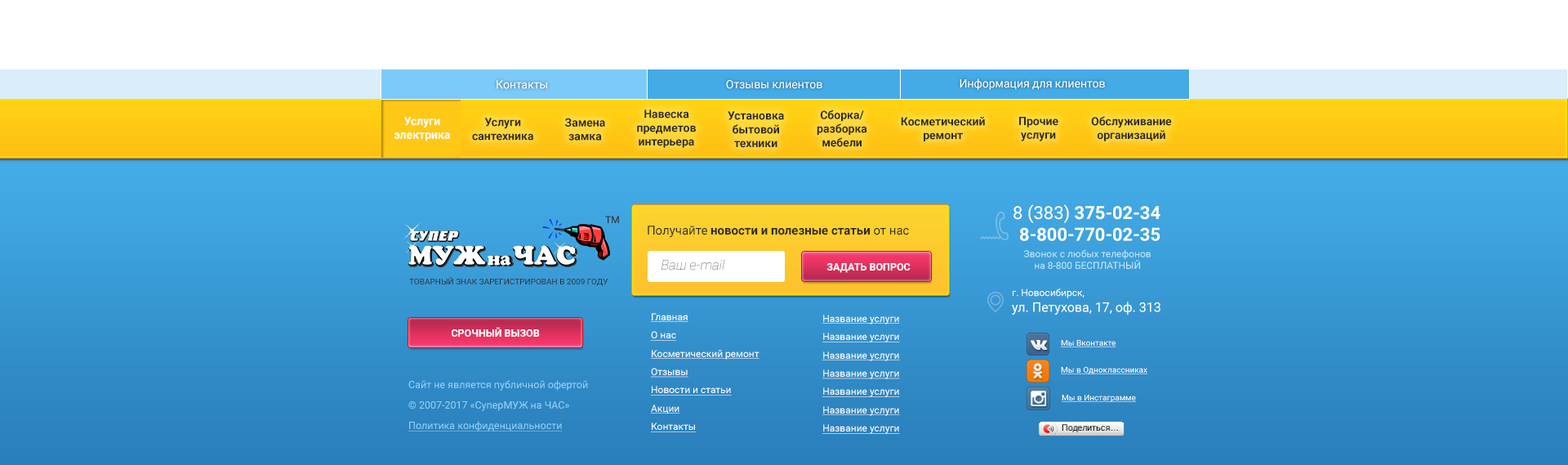
<style>
.page{position:relative;width:1568px;height:465px}
.page>*{position:absolute;margin:0}
.t1{font:11.4px "Roboto-Regular";color:#ffffff}
.t2{font:11.4px "Roboto-Bold";color:#2d2d2d}
.t3{font:11.4px "Roboto-Bold";color:#ffffff}
.t4{font:18px "Roboto-Bold";color:#ffffff}
.t5{font:18px "Roboto-Regular";color:#ffffff}
.t6{font:12.2px "Roboto-Bold";color:#2d2d2d}
.t7{font:12.2px "Roboto-Regular";color:#2d2d2d}
.t8{font:9.8px "Roboto-Regular";color:#bfe6ff}
.t9{font:9.8px "Roboto-Regular";color:#bfe6ff;text-transform:uppercase}
.t10{font:13.6px "Roboto-ThinItalic"}
.t11{font:10.2px "Roboto-Bold";color:#fffefe;text-transform:uppercase}
.t12{font:8.2px "Roboto-Regular";color:#2d2d2d;text-transform:uppercase}
.t13{font:13.1px "Roboto-Regular";color:#ffffff}
.t14{font:9.8px "Roboto-Regular";color:#ffffff}
.t15{font:9.8px "Roboto-Regular";color:#ffffff;text-decoration:underline}
.t16{font:8.2px "Roboto-Regular";color:#ffffff;text-decoration:underline}
.t17{font:10.2px "Roboto-Regular";color:#94d1f8}
.t18{font:10.2px "Roboto-Regular";color:#94d1f8;text-decoration:underline}
</style>
<div class="page">
<p class="t1" style="left:497px;top:80px;width:50px;height:9px">Контакты</p>
<p class="t1" style="left:726px;top:80px;width:96px;height:9px">Отзывы клиентов</p>
<p class="t1" style="left:960px;top:78px;width:145px;height:12px">Информация для клиентов</p>
<p class="t2" style="left:637px;top:109px;width:59px;height:39px;text-align:center">Навеска<br>предметов<br>интерьера</p>
<p class="t2" style="left:728px;top:111px;width:56px;height:37px;text-align:center">Установка<br>бытовой<br>техники</p>
<p class="t2" style="left:817px;top:109px;width:50px;height:38px;text-align:center">Сборка/<br>разборка<br>мебели</p>
<p class="t3" style="left:394px;top:117px;width:56px;height:24px;text-align:center">Услуги<br>электрика</p>
<p class="t2" style="left:472px;top:118px;width:61px;height:22px;text-align:center">Услуги<br>сантехника</p>
<p class="t2" style="left:565px;top:118px;width:40px;height:22px;text-align:center">Замена<br>замка</p>
<p class="t2" style="left:901px;top:117px;width:84px;height:24px;text-align:center">Косметический<br>ремонт</p>
<p class="t2" style="left:1019px;top:117px;width:39px;height:24px;text-align:center">Прочие<br>услуги</p>
<p class="t2" style="left:1091px;top:116px;width:81px;height:25px;text-align:center">Обслуживание<br>организаций</p>
<p class="t4" style="left:1013px;top:204px;width:147px;height:37px;text-align:right"><span class="t5">8 (383) </span>375-02-34<br>8-800-770-02-35</p>
<p class="t6" style="left:648px;top:225px;width:261px;height:13px"><span class="t7">Получайте </span>новости и полезные статьи<span class="t7"> от нас</span></p>
<p class="t8" style="left:1024px;top:249px;width:127px;height:20px;text-align:center">Звонок с любых телефонов<br>на 8-800 <span class="t9">бесплатный</span></p>
<p class="t10" style="left:662px;top:259px;width:63px;height:11px">Ваш e-mail</p>
<p class="t11" style="left:826px;top:263px;width:85px;height:10px">задать вопрос</p>
<p class="t12" style="left:409px;top:277px;width:199px;height:9px">Товарный знак зарегистрирован в 2009 году</p>
<p class="t13" style="left:1012px;top:288px;width:148px;height:26px"><span class="t14">г. Новосибирск,<br></span>ул. Петухова, 17, оф. 313</p>
<p class="t15" style="left:651px;top:313px;width:109px;height:119px">Главная<br>О нас<br>Косметический ремонт<br>Отзывы<br>Новости и статьи<br>Акции<br>Контакты</p>
<p class="t15" style="left:822px;top:314px;width:78px;height:120px">Название услуги<br>Название услуги<br>Название услуги<br>Название услуги<br>Название услуги<br>Название услуги<br>Название услуги</p>
<p class="t11" style="left:452px;top:327px;width:88px;height:9px">срочный вызов</p>
<p class="t16" style="left:1061px;top:340px;width:55px;height:7px">Мы Вконтакте</p>
<p class="t16" style="left:1061px;top:367px;width:86px;height:7px">Мы в Одноклассниках</p>
<p class="t17" style="left:408px;top:380px;width:180px;height:51px">Сайт не является публичной офертой<br>© 2007-2017 «СуперМУЖ на ЧАС»<br><span class="t18">Политика конфиденциальности</span></p>
<p class="t16" style="left:1062px;top:394px;width:74px;height:8px">Мы в Инстаграмме</p>
</div>
